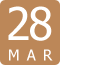
<style>
.page{position:relative;width:85px;height:80px;background:#ffffff}
.page>*{position:absolute;margin:0}
.t1{font:45px "Tahoma";letter-spacing:-0.05em;color:#ffffff}
.t2{font:15px "Tahoma";color:#ffffff}
</style>
<div class="page">
<p class="t1" style="left:8px;top:6px;width:44px;height:35px">28</p>
<p class="t2" style="left:9px;top:49px;width:44px;height:12px">MAR</p>
</div>
